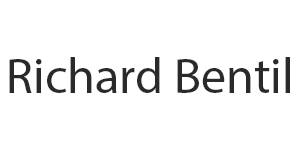
<style>
.page{position:relative;width:300px;height:150px;background:#ffffff}
.page>*{position:absolute;margin:0}
.t1{font:12px "MyriadPro-Regular";color:#2a2a2a}
</style>
<div class="page">
<p class="t1" style="left:9px;top:57px;width:281px;height:36px">Richard Bentil</p>
</div>
